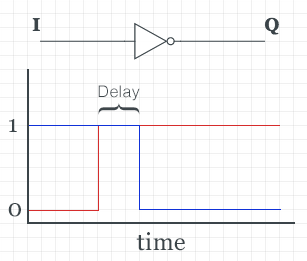
<style>
.page{position:relative;width:307px;height:261px;background:#ffffff}
.page>*{position:absolute;margin:0}
.t1{font:16px "Helvetica-Light";letter-spacing:0.02em;color:#3e464b}
.t2{font:44px "Helvetica-Light";letter-spacing:0.02em;color:#3e464b;scale:1.12 1}
.t3{font:24px "Georgia";letter-spacing:0.02em;color:#3b4449}
</style>
<div class="page">
<p class="t1" style="left:98px;top:85px;width:42px;height:16px">Delay</p>
<p class="t2" style="left:98px;top:103px;width:42px;height:12px;rotate:90deg">{</p>
<p class="t3" style="left:9px;top:119px;width:8px;height:13px">1</p>
<p class="t3" style="left:8px;top:203px;width:13px;height:14px">0</p>
<p class="t3" style="left:136px;top:232px;width:49px;height:19px">time</p>
</div>
